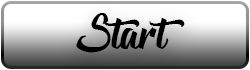
<style>
.page{position:relative;width:250px;height:70px}
.page>*{position:absolute;margin:0}
.t1{font:46.6px "The-Blacklist";color:#000000}
</style>
<div class="page">
<p class="t1" style="left:76px;top:13px;width:109px;height:40px">Start</p>
</div>
